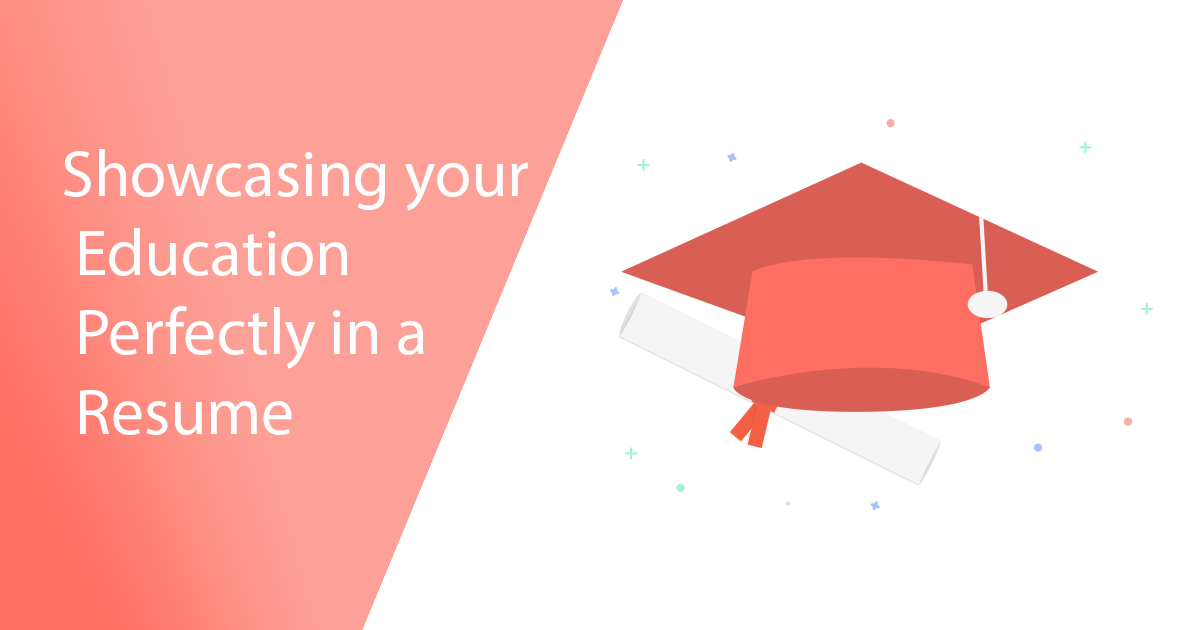
<style>
.page{position:relative;width:1200px;height:630px;background:#ffffff}
.page>*{position:absolute;margin:0}
.t1{font:66px "MyriadPro-Regular";color:#ffffff}
</style>
<div class="page">
<p class="t1" style="left:64px;top:149px;width:464px;height:286px">Showcasing your<br> Education<br> Perfectly in a<br> Resume</p>
</div>
